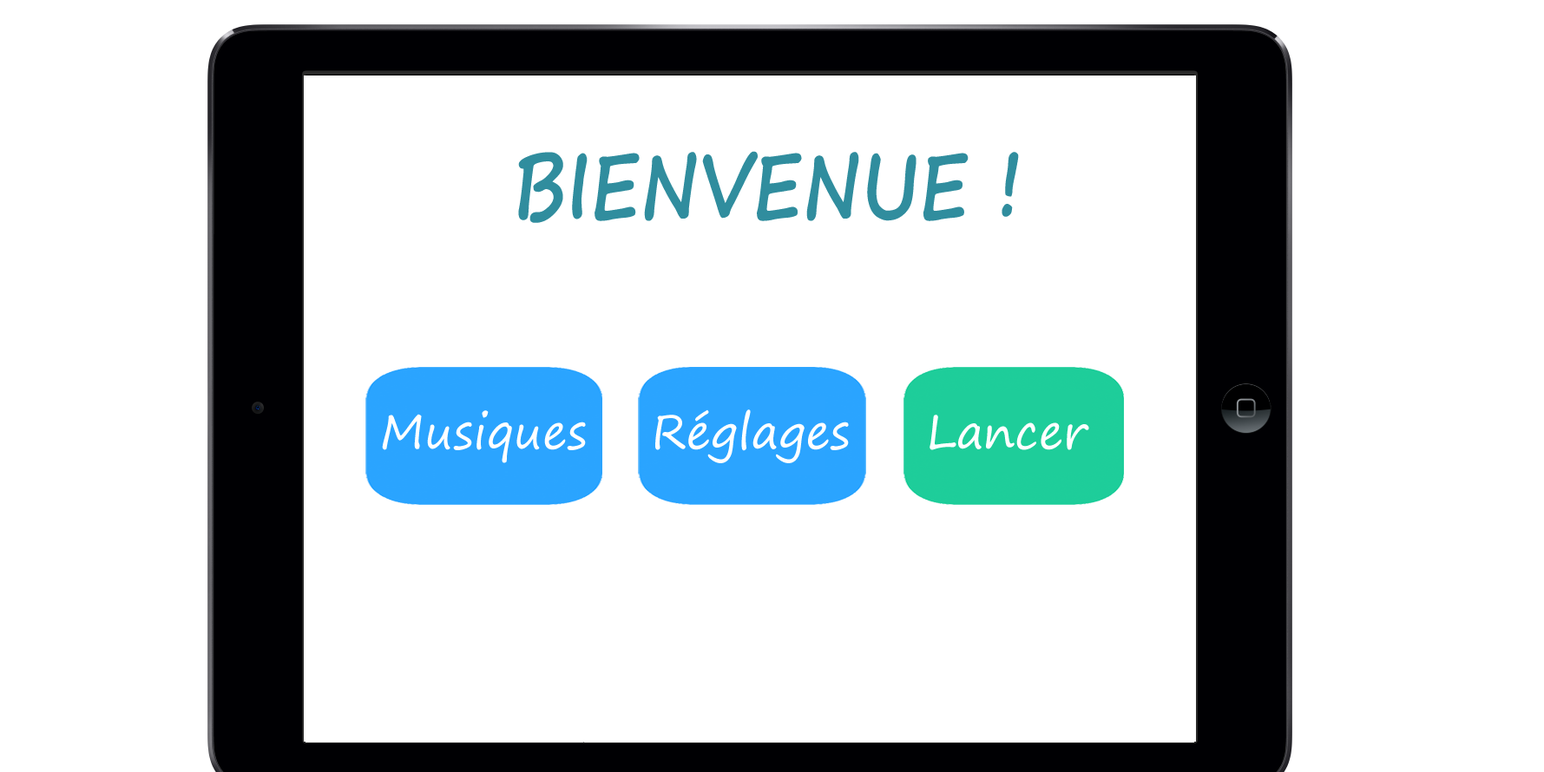
<style>
.page{position:relative;width:1544px;height:772px;background:#ffffff}
.page>*{position:absolute;margin:0}
.t1{font:90.1px "SegoePrint-Bold";color:#308d9e;scale:0.82 1}
.t2{font:47px "SegoePrint";color:#ffffff}
</style>
<div class="page">
<p class="t1" style="left:518px;top:151px;width:501px;height:72px">BIENVENUE !</p>
<p class="t2" style="left:382px;top:410px;width:204px;height:53px">Musiques</p>
<p class="t2" style="left:655px;top:410px;width:194px;height:53px">Réglages</p>
<p class="t2" style="left:929px;top:415px;width:160px;height:35px">Lancer</p>
</div>
